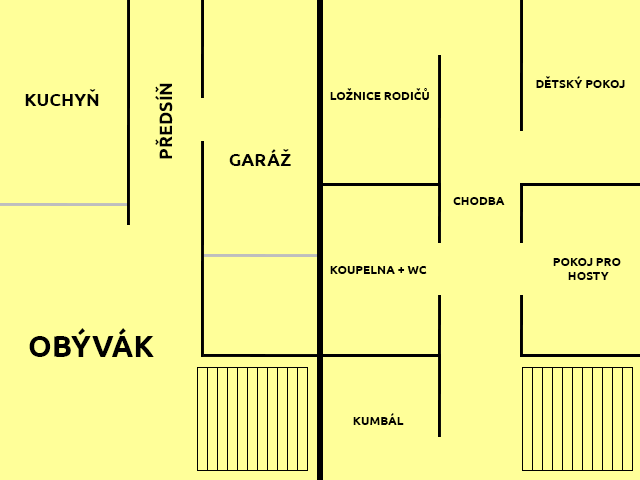
<style>
.page{position:relative;width:640px;height:480px;background:#ffff99}
.page>*{position:absolute;margin:0}
.t1{font:12px "Ubuntu-Bold";color:#000000;text-transform:uppercase}
.t2{font:18px "Ubuntu-Bold";color:#000000;text-transform:uppercase}
.t3{font:17.8px "Ubuntu-Bold";color:#000000;text-transform:uppercase}
.t4{font:30px "Ubuntu-Bold";color:#000000;text-transform:uppercase}
</style>
<div class="page">
<p class="t1" style="left:536px;top:76px;width:89px;height:12px">Dětský pokoj</p>
<p class="t2" style="left:25px;top:89px;width:74px;height:17px">kuchyň</p>
<p class="t3" style="left:155px;top:83px;width:18px;height:76px;rotate:-90deg">Předsíň</p>
<p class="t1" style="left:330px;top:88px;width:99px;height:12px">Ložnice rodičů</p>
<p class="t2" style="left:229px;top:149px;width:62px;height:17px">Garáž</p>
<p class="t1" style="left:453px;top:197px;width:52px;height:8px">chodba</p>
<p class="t1" style="left:330px;top:266px;width:97px;height:8px">Koupelna + WC</p>
<p class="t1" style="left:553px;top:258px;width:68px;height:22px;text-align:center">Pokoj Pro <br>hosty</p>
<p class="t4" style="left:29px;top:328px;width:125px;height:29px">Obývák</p>
<p class="t1" style="left:353px;top:413px;width:51px;height:12px">Kumbál</p>
</div>
